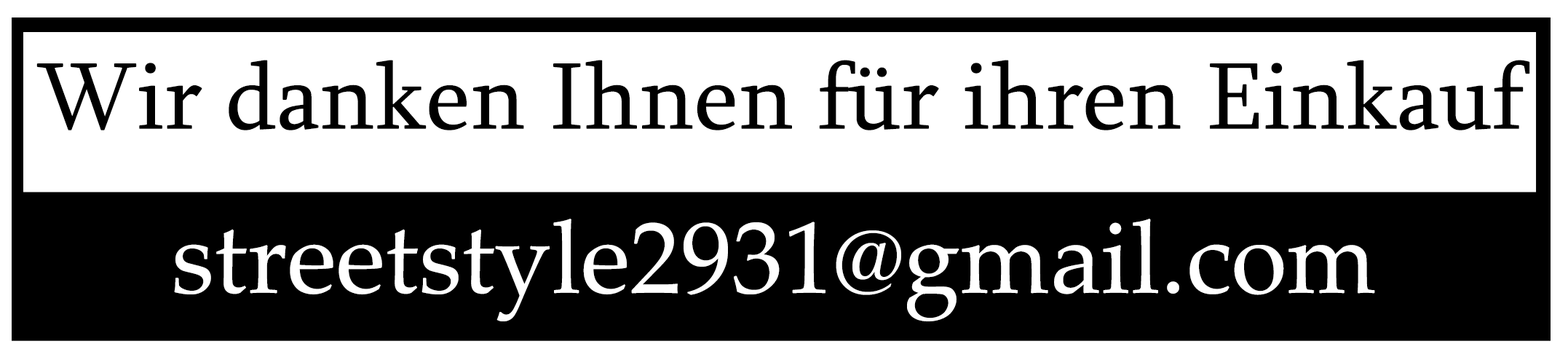
<style>
.page{position:relative;width:1568px;height:360px;background:#ffffff}
.page>*{position:absolute;margin:0}
.t1{font:97px "Sylfaen";color:#000000}
.t2{font:101.9px "PalatinoLinotype-Roman";color:#ffffff}
</style>
<div class="page">
<p class="t1" style="left:36px;top:60px;width:1494px;height:70px">Wir danken Ihnen für ihren Einkauf</p>
<p class="t2" style="left:174px;top:218px;width:1201px;height:103px">streetstyle2931@gmail.com</p>
</div>
